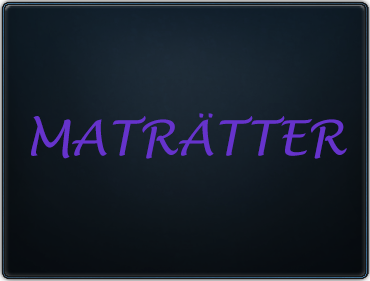
<style>
.page{position:relative;width:370px;height:281px}
.page>*{position:absolute;margin:0}
.t1{font:48px "LucidaHandwriting-Italic";color:#6633cc}
</style>
<div class="page">
<p class="t1" style="left:31px;top:113px;width:316px;height:46px">MATRÄTTER</p>
</div>
